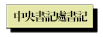
<style>
.page{position:relative;width:103px;height:37px;background:#ffffff}
.page>*{position:absolute;margin:0}
.t1{font:11.7px "SoukouMincho";letter-spacing:-0.1em;color:#000000}
</style>
<div class="page">
<p class="t1" style="left:14px;top:10px;width:74px;height:12px">中央書記處書記</p>
</div>
